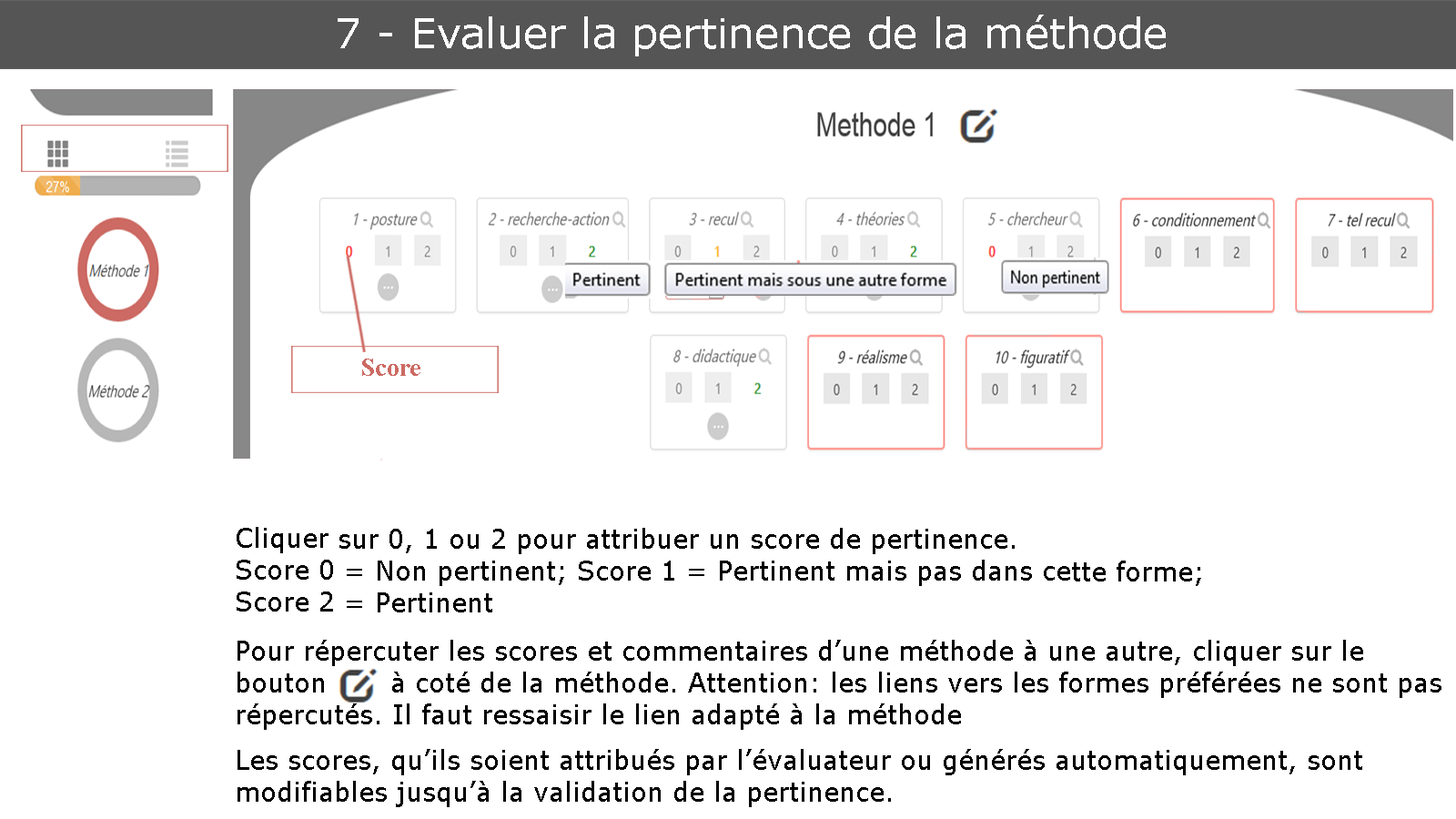
<style>
.page{position:relative;width:1456px;height:819px;background:#ffffff}
.page>*{position:absolute;margin:0}
.t1{font:41.7px "Verdana";color:#ffffff}
.t2{font:26.5px "TimesNewRomanPS-BoldMT";color:#cc6a63}
.t3{font:26.5px "Verdana";color:#000000}
</style>
<div class="page">
<p class="t1" style="left:338px;top:15px;width:828px;height:41px">7 - Evaluer la pertinence de la méthode</p>
<p class="t2" style="left:362px;top:359px;width:58px;height:17px">Score</p>
<p class="t3" style="left:237px;top:527px;width:964px;height:85px">Cliquer sur 0, 1 ou 2 pour attribuer un score de pertinence.<br>Score 0 = Non pertinent; Score 1 = Pertinent mais pas dans cette forme;<br>Score 2 = Pertinent</p>
<p class="t3" style="left:238px;top:640px;width:1203px;height:90px">Pour répercuter les scores et commentaires d’une méthode à une autre, cliquer sur le bouton       à coté de la méthode. Attention: les liens vers les formes préférées ne sont pas répercutés. Il faut ressaisir le lien adapté à la méthode</p>
<p class="t3" style="left:238px;top:749px;width:1124px;height:58px">Les scores, qu’ils soient attribués par l’évaluateur ou générés automatiquement, sont modifiables jusqu’à la validation de la pertinence.</p>
</div>
